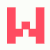
<style>
.page{position:relative;width:50px;height:50px;background:#fbfdf9}
.page>*{position:absolute;margin:0}
.t1{font:49.9px "RetroComputer";color:#ff4c61;font-weight:bold}
</style>
<div class="page">
<p class="t1" style="left:7px;top:7px;width:38px;height:37px">W</p>
</div>
